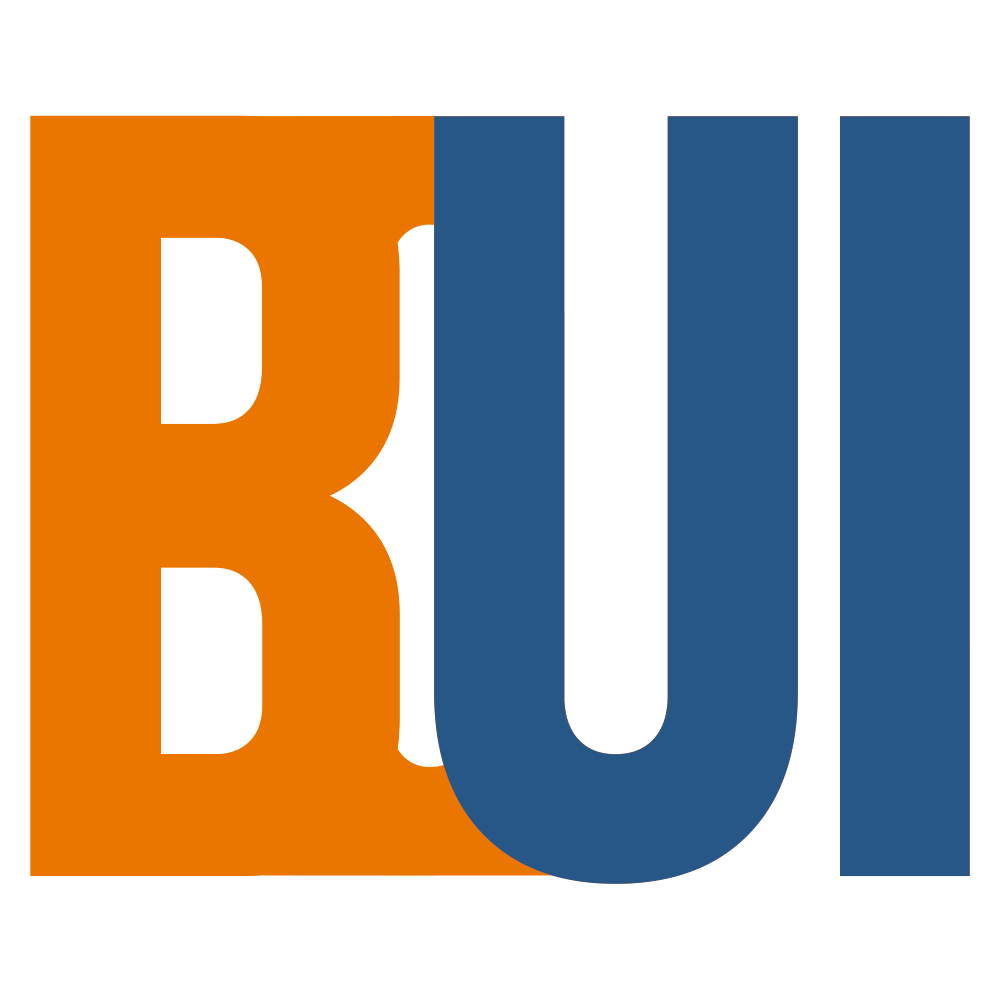
<style>
.page{position:relative;width:1000px;height:1000px;background:#ffffff}
.page>*{position:absolute;margin:0}
.t1{font:1070.1px "Bahnschrift-BoldCondensed";letter-spacing:-0.02em;color:#265787}
.t2{font:1070.1px "Bahnschrift-BoldCondensed";letter-spacing:-0.02em;color:#ea7600}
</style>
<div class="page">
<p class="t1" style="left:30px;top:116px;width:940px;height:768px"><span class="t2">B</span>UI</p>
</div>
